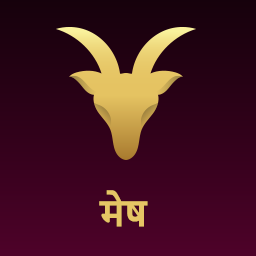
<style>
.page{position:relative;width:256px;height:256px}
.page>*{position:absolute;margin:0}
.t1{font:34.1px "NirmalaUI-Bold";letter-spacing:-0.05em;color:#e6c565;text-transform:uppercase;font-weight:bold}
</style>
<div class="page">
<p class="t1" style="left:99px;top:190px;width:49px;height:37px">मेष</p>
</div>
